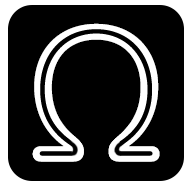
<style>
.page{position:relative;width:192px;height:192px;background:#000000}
.page>*{position:absolute;margin:0}
.t1{font:192px "SFProRounded-Regular";color:#ffffff}
</style>
<div class="page">
<p class="t1" style="left:32px;top:23px;width:128px;height:139px">Ω</p>
</div>
